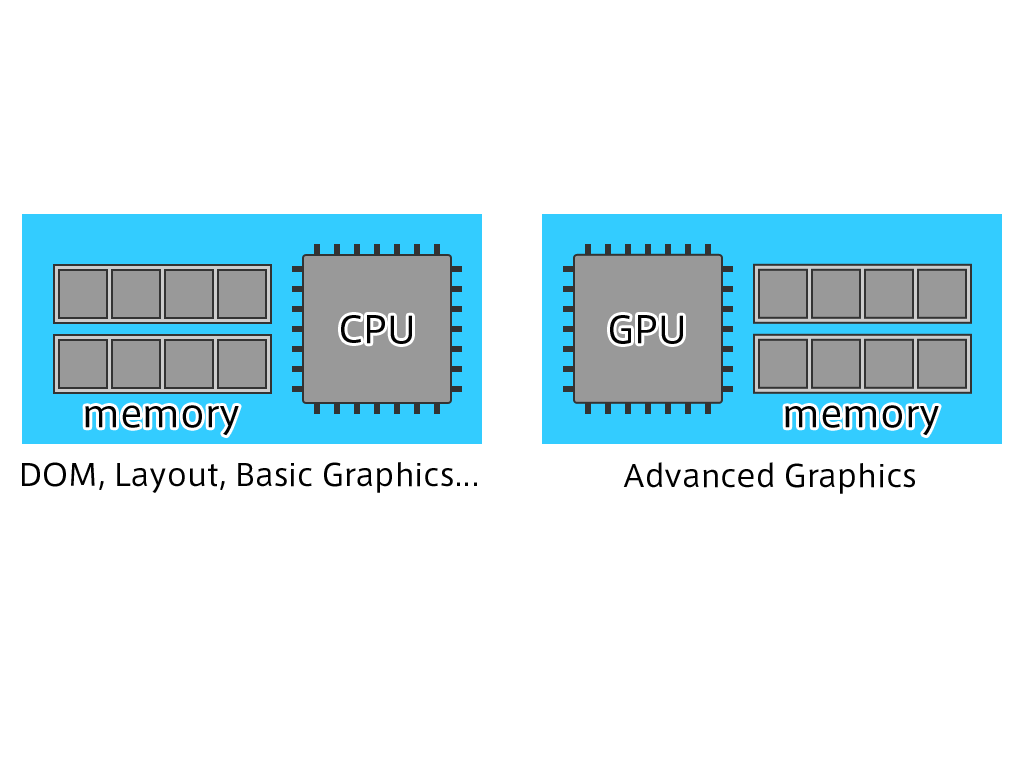
<style>
.page{position:relative;width:1024px;height:768px;background:#ffffff}
.page>*{position:absolute;margin:0}
.t1{font:36px "AxisStd-Regular";color:#000000}
.t2{font:30px "AxisStd-Regular";color:#000000}
</style>
<div class="page">
<p class="t1" style="left:341px;top:315px;width:71px;height:29px">CPU</p>
<p class="t1" style="left:610px;top:315px;width:73px;height:29px">GPU</p>
<p class="t1" style="left:85px;top:405px;width:154px;height:31px">memory</p>
<p class="t1" style="left:785px;top:405px;width:154px;height:31px">memory</p>
<p class="t2" style="left:22px;top:462px;width:455px;height:31px">DOM, Layout, Basic Graphics...</p>
<p class="t2" style="left:623px;top:462px;width:292px;height:32px">Advanced Graphics</p>
</div>
